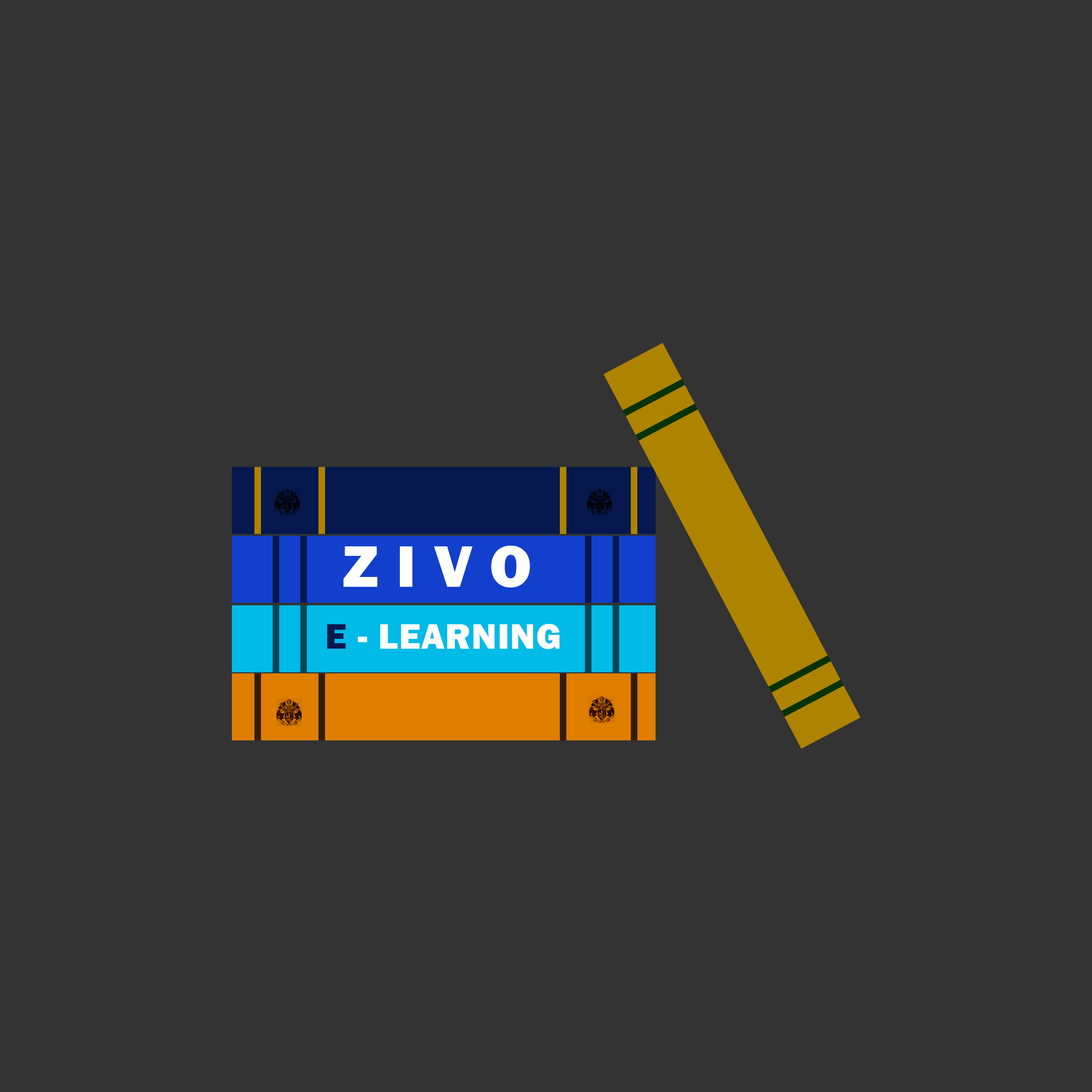
<style>
.page{position:relative;width:1092px;height:1092px;background:#333333}
.page>*{position:absolute;margin:0}
.t1{font:60.6px "FranklinGothic-Heavy";letter-spacing:0.3em;color:#ffffff}
.t2{font:36.9px "FranklinGothic-Heavy";letter-spacing:0.02em;color:#ffffff}
.t3{font:36.9px "FranklinGothic-Heavy";letter-spacing:0.02em;color:#06184e}
</style>
<div class="page">
<p class="t1" style="left:343px;top:546px;width:187px;height:41px">ZIVO</p>
<p class="t2" style="left:327px;top:624px;width:233px;height:25px"><span class="t3">E</span> - LEARNING</p>
</div>
